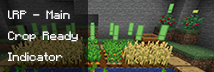
<style>
.page{position:relative;width:214px;height:72px}
.page>*{position:absolute;margin:0}
.t1{font:12px "Mojangles";color:#ffffff}
</style>
<div class="page">
<p class="t1" style="left:8px;top:10px;width:70px;height:51px">lRP - Main  <br>Crop Ready<br>Indicator</p>
</div>
